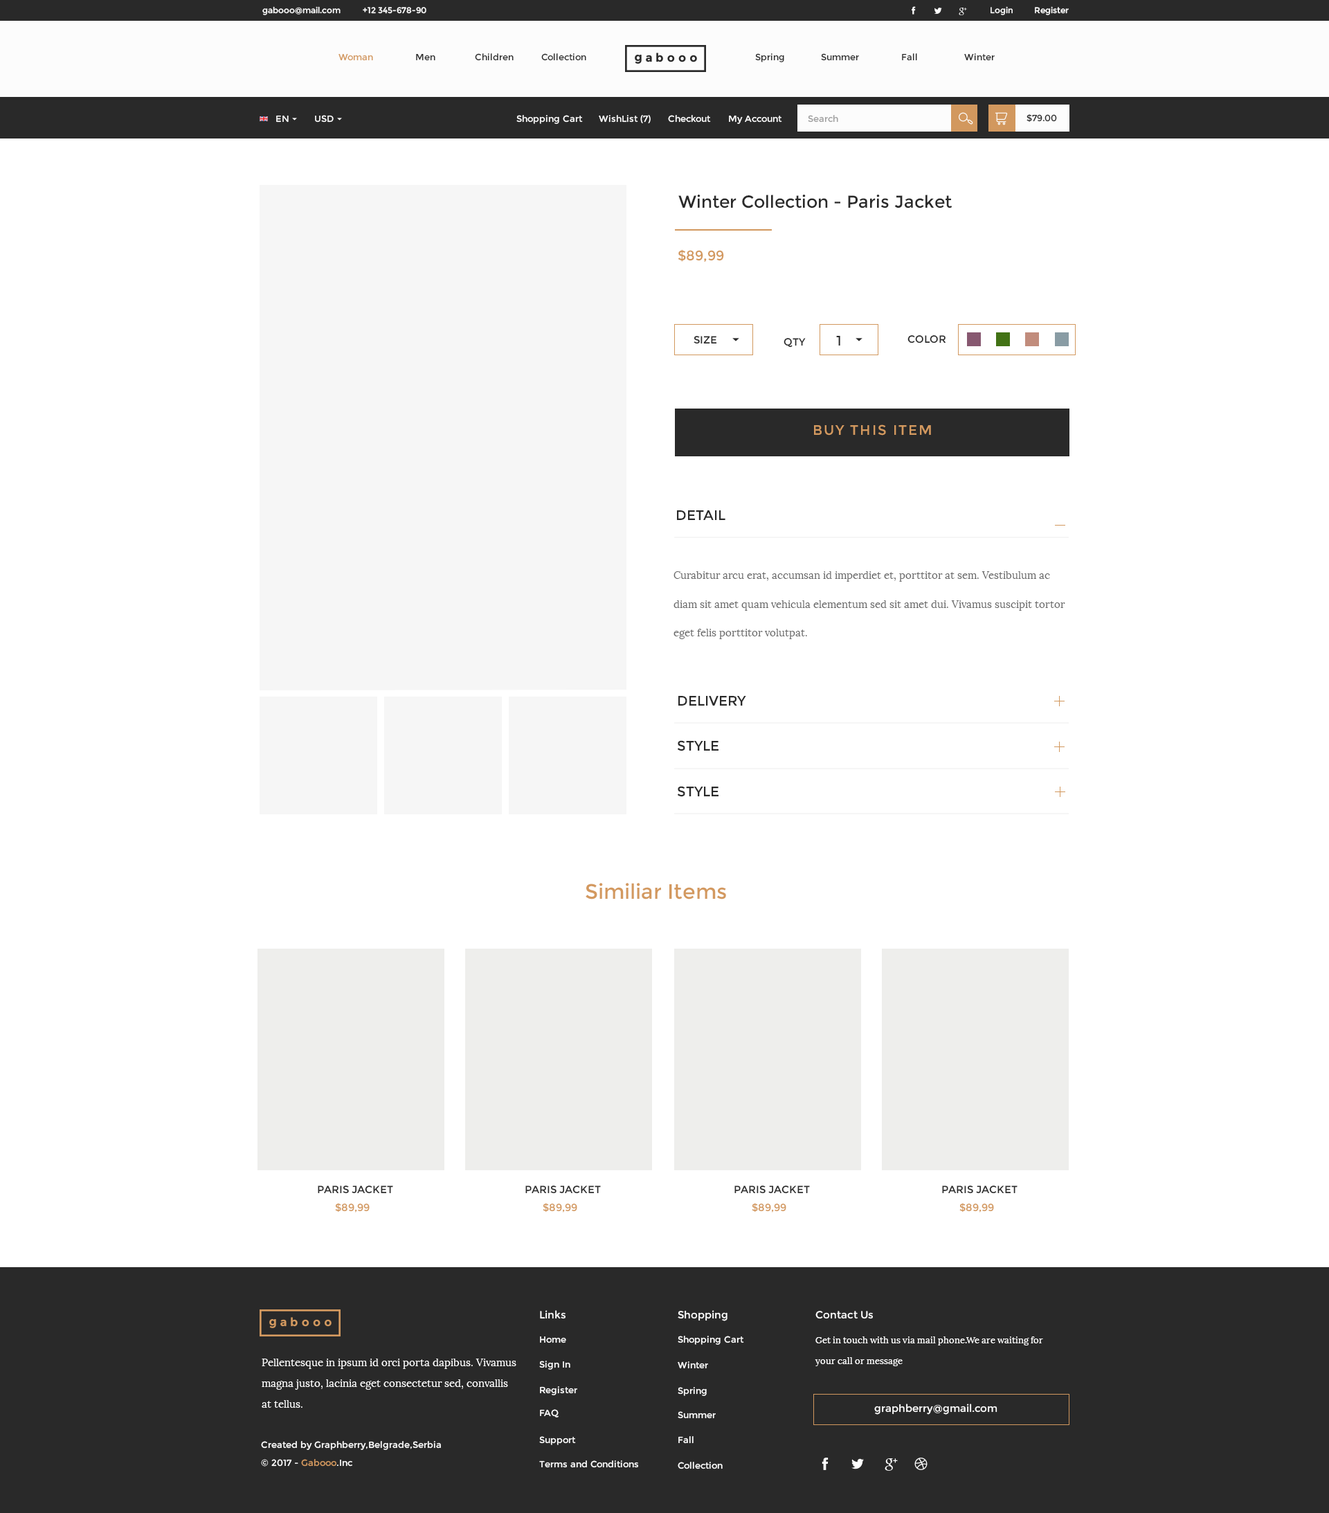
<style>
.page{position:relative;width:1329px;height:1513px;background:#ffffff}
.page>*{position:absolute;margin:0}
.t1{font:8.3px "Montserrat-Regular";color:#fdfdfd}
.t2{font:9px "Montserrat-Regular";color:#d3995f}
.t3{font:9px "Montserrat-Regular";color:#2a2a2a}
.t4{font:9px "Montserrat-Regular";color:#fdfdfd}
.t5{font:9px "Montserrat-Regular";color:#ffffff}
.t6{font:9px "Montserrat-Regular";color:#9f9f9f}
.t7{font:17.3px "Montserrat-Regular";color:#2a2a2a}
.t8{font:13.8px "Montserrat-Regular";color:#d3995f}
.t9{font:10.4px "Montserrat-Regular";color:#2a2a2a}
.t10{font:13.8px "Montserrat-Regular";color:#2a2a2a}
.t11{font:13.8px "Montserrat-Regular";letter-spacing:0.1em;color:#d3995f}
.t12{font:10.4px/28.6px "Lora-Regular";color:#686868}
.t13{font:20.8px "Montserrat-Regular";color:#d3995f}
.t14{font:10.4px "Montserrat-Regular";color:#d3995f}
.t15{font:10.4px "Montserrat-Regular";color:#fdfdfd}
.t16{font:9px/20.8px "Lora-Regular";color:#ffffff}
.t17{font:10.4px/20.8px "Lora-Regular";color:#ffffff}
</style>
<div class="page">
<p class="t1" style="left:262px;top:6px;width:79px;height:9px">gabooo@mail.com</p>
<p class="t1" style="left:363px;top:7px;width:63px;height:7px">+12 345-678-90</p>
<p class="t1" style="left:991px;top:6px;width:22px;height:9px">Login</p>
<p class="t1" style="left:1035px;top:6px;width:34px;height:9px">Register</p>
<p class="t2" style="left:339px;top:53px;width:34px;height:8px">Woman</p>
<p class="t3" style="left:416px;top:53px;width:19px;height:8px">Men</p>
<p class="t3" style="left:475px;top:53px;width:39px;height:8px">Children</p>
<p class="t3" style="left:541px;top:53px;width:45px;height:8px">Collection</p>
<p class="t3" style="left:755px;top:53px;width:29px;height:9px">Spring</p>
<p class="t3" style="left:821px;top:53px;width:38px;height:8px">Summer</p>
<p class="t3" style="left:902px;top:53px;width:15px;height:8px">Fall</p>
<p class="t3" style="left:964px;top:53px;width:31px;height:8px">Winter</p>
<p class="t4" style="left:276px;top:115px;width:13px;height:8px">EN</p>
<p class="t4" style="left:315px;top:115px;width:19px;height:8px">USD</p>
<p class="t5" style="left:516px;top:115px;width:67px;height:9px">Shopping Cart</p>
<p class="t5" style="left:599px;top:115px;width:52px;height:8px">WishList (7)</p>
<p class="t5" style="left:668px;top:115px;width:43px;height:8px">Checkout</p>
<p class="t5" style="left:729px;top:115px;width:53px;height:9px">My Account</p>
<p class="t6" style="left:808px;top:115px;width:30px;height:8px">Search</p>
<p class="t3" style="left:1027px;top:114px;width:30px;height:8px">$79.00</p>
<p class="t7" style="left:678px;top:195px;width:275px;height:13px">Winter Collection - Paris Jacket</p>
<p class="t8" style="left:678px;top:249px;width:46px;height:13px">$89,99</p>
<p class="t9" style="left:694px;top:336px;width:23px;height:8px">SIZE</p>
<p class="t9" style="left:784px;top:338px;width:22px;height:10px">QTY</p>
<p class="t10" style="left:836px;top:336px;width:4px;height:9px">1</p>
<p class="t9" style="left:908px;top:335px;width:38px;height:8px">COLOR</p>
<p class="t11" style="left:814px;top:424px;width:117px;height:11px">BUY THIS ITEM</p>
<p class="t10" style="left:677px;top:510px;width:49px;height:10px">DETAIL</p>
<p class="t12" style="left:674px;top:571px;width:391px;height:68px">Curabitur arcu erat, accumsan id imperdiet et, porttitor at sem. Vestibulum ac diam sit amet quam vehicula elementum sed sit amet dui. Vivamus suscipit tortor eget felis porttitor volutpat.</p>
<p class="t10" style="left:678px;top:696px;width:68px;height:9px">DELIVERY</p>
<p class="t10" style="left:677px;top:740px;width:42px;height:11px">STYLE</p>
<p class="t10" style="left:677px;top:786px;width:42px;height:11px">STYLE</p>
<p class="t13" style="left:586px;top:883px;width:140px;height:16px">Similiar Items</p>
<p class="t9" style="left:318px;top:1185px;width:75px;height:9px">PARIS JACKET</p>
<p class="t9" style="left:525px;top:1185px;width:76px;height:9px">PARIS JACKET</p>
<p class="t9" style="left:735px;top:1185px;width:75px;height:9px">PARIS JACKET</p>
<p class="t9" style="left:942px;top:1185px;width:76px;height:9px">PARIS JACKET</p>
<p class="t14" style="left:335px;top:1203px;width:35px;height:9px">$89,99</p>
<p class="t14" style="left:543px;top:1203px;width:34px;height:9px">$89,99</p>
<p class="t14" style="left:752px;top:1203px;width:34px;height:9px">$89,99</p>
<p class="t14" style="left:960px;top:1203px;width:34px;height:9px">$89,99</p>
<p class="t15" style="left:540px;top:1310px;width:26px;height:9px">Links</p>
<p class="t15" style="left:678px;top:1310px;width:50px;height:11px">Shopping</p>
<p class="t15" style="left:816px;top:1311px;width:57px;height:8px">Contact Us</p>
<p class="t5" style="left:540px;top:1336px;width:26px;height:7px">Home</p>
<p class="t5" style="left:678px;top:1335px;width:66px;height:9px">Shopping Cart</p>
<p class="t16" style="left:815px;top:1336px;width:228px;height:30px">Get in touch with us via mail phone.We are waiting for <br>your call or message</p>
<p class="t17" style="left:262px;top:1358px;width:254px;height:49px">Pellentesque in ipsum id orci porta dapibus. Vivamus magna justo, lacinia eget consectetur sed, convallis at tellus.</p>
<p class="t5" style="left:539px;top:1360px;width:31px;height:9px">Sign In</p>
<p class="t5" style="left:678px;top:1361px;width:30px;height:8px">Winter</p>
<p class="t5" style="left:540px;top:1386px;width:37px;height:9px">Register</p>
<p class="t5" style="left:678px;top:1387px;width:29px;height:9px">Spring</p>
<p class="t5" style="left:540px;top:1409px;width:19px;height:8px">FAQ</p>
<p class="t15" style="left:874px;top:1403px;width:124px;height:11px">graphberry@gmail.com</p>
<p class="t5" style="left:678px;top:1411px;width:38px;height:8px">Summer</p>
<p class="t5" style="left:261px;top:1441px;width:180px;height:9px">Created by Graphberry,Belgrade,Serbia</p>
<p class="t5" style="left:539px;top:1436px;width:37px;height:9px">Support</p>
<p class="t5" style="left:678px;top:1436px;width:16px;height:7px">Fall</p>
<p class="t5" style="left:261px;top:1459px;width:91px;height:7px">© 2017 - <span class="t2">Gabooo</span>.Inc</p>
<p class="t5" style="left:539px;top:1460px;width:99px;height:8px">Terms and Conditions</p>
<p class="t5" style="left:678px;top:1461px;width:45px;height:8px">Collection</p>
</div>
